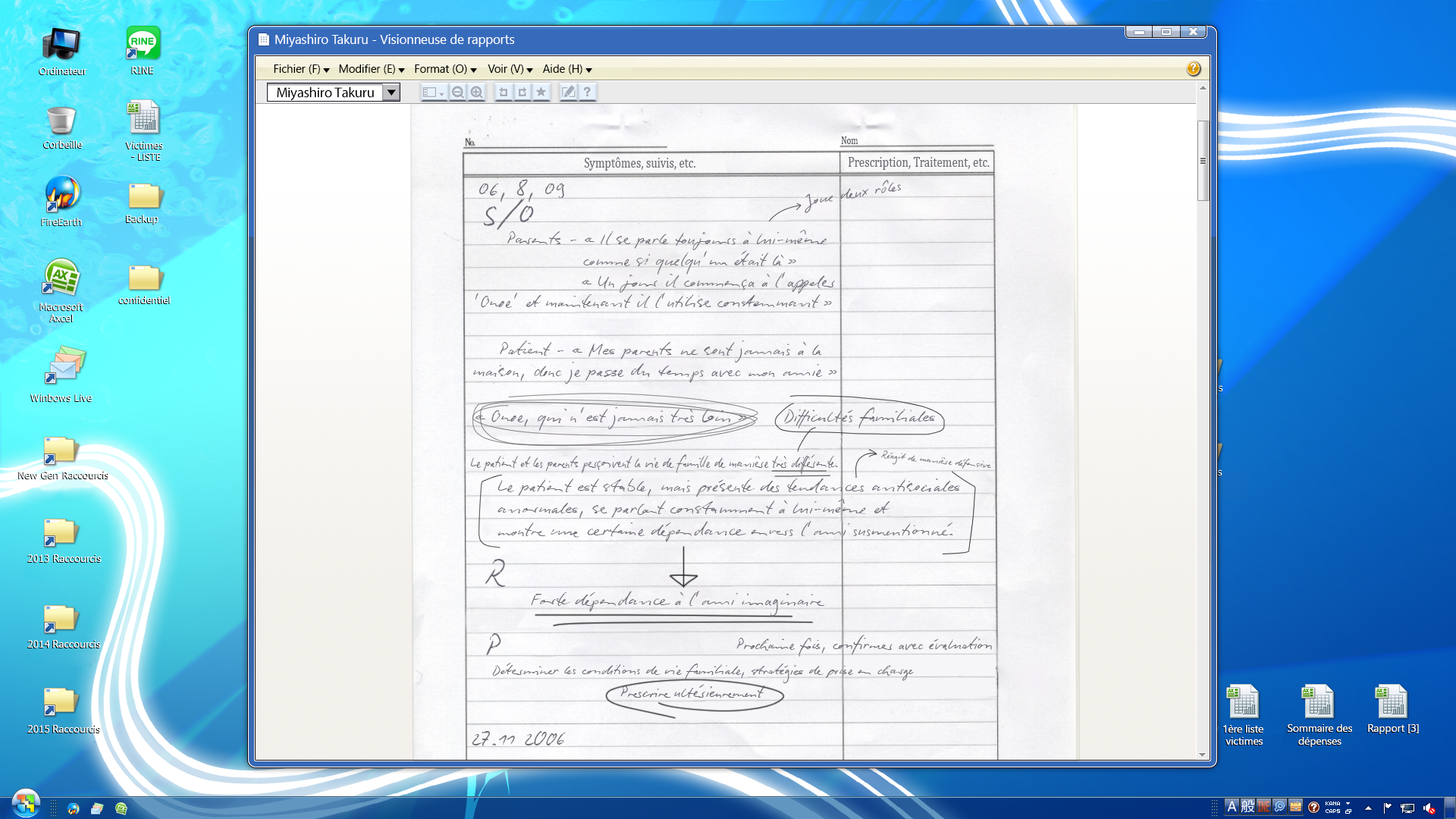
<style>
.page{position:relative;width:1456px;height:819px}
.page>*{position:absolute;margin:0}
.t1{font:12.6px "SegoeUIHistoric";color:#ffffff}
.t2{font:11.1px "SegoeUIHistoric";color:#000000}
.t3{font:10.8px "Cambria";color:#59555f;scale:0.76 1}
.t4{font:15.2px "Cambria";color:#726e79;scale:0.76 1}
.t5{font:22.7px "BiroScriptPlus";color:#726e79}
.t6{font:16.3px "BiroScriptPlus";color:#726e79}
.t7{font:34px "BiroScriptPlus";color:#726e79}
.t8{font:17.4px "BiroScriptPlus";color:#726e79}
.t9{font:18.2px "BiroScriptPlus";color:#726e79}
.t10{font:16.7px "BiroScriptPlus";color:#726e79;scale:0.68 1}
.t11{font:9.3px "BiroScriptPlus";color:#726e79}
.t12{font:32px "BiroScriptPlus";color:#726e79}
.t13{font:15.2px "BiroScriptPlus";color:#726e79}
.t14{font:14.3px "BiroScriptPlus";color:#726e79}
.t15{font:22px "BiroScriptPlus";color:#726e79}
</style>
<div class="page">
<p class="t1" style="left:275px;top:34px;width:240px;height:13px">Miyashiro Takuru - Visionneuse de rapports</p>
<p class="t2" style="left:274px;top:64px;width:46px;height:10px">Fichier (F)</p>
<p class="t2" style="left:339px;top:64px;width:56px;height:10px">Modifier (E)</p>
<p class="t2" style="left:415px;top:64px;width:52px;height:10px">Format (O)</p>
<p class="t2" style="left:488px;top:64px;width:36px;height:10px">Voir (V)</p>
<p class="t2" style="left:542px;top:64px;width:40px;height:10px">Aide (H)</p>
<p class="t3" style="left:841px;top:136px;width:17px;height:8px">Nom</p>
<p class="t4" style="left:584px;top:157px;width:111px;height:14px">Symptômes, suivis, etc.</p>
<p class="t4" style="left:849px;top:157px;width:141px;height:13px">Prescription, Traitement, etc.</p>
<p class="t5" style="left:479px;top:179px;width:86px;height:23px">06, 8, 09</p>
<p class="t6" style="left:805px;top:180px;width:96px;height:33px;rotate:-9deg">Joue deux rôles</p>
<p class="t7" style="left:483px;top:199px;width:51px;height:31px">S/0</p>
<p class="t8" style="left:475px;top:230px;width:360px;height:78px">Parents - « Il se parle toujours à lui-même<br>    comme si quelqu’un était là »<br>       « Un jour il commença à l’appeler<br>‘Onoe’ et maintenant il l’utilise constemmant »</p>
<p class="t9" style="left:473px;top:340px;width:364px;height:44px">Patient - « Mes parents ne sont jamais à la <br>maison, donc je passe du temps avec mon amie »</p>
<p class="t9" style="left:475px;top:407px;width:272px;height:24px">« Onoe, qui n’est jamais très loin »</p>
<p class="t9" style="left:784px;top:407px;width:151px;height:21px">Difficultés familiales</p>
<p class="t10" style="left:470px;top:454px;width:368px;height:21px">Le patient et les parents perçoivent la vie de famille de manière très différente.</p>
<p class="t11" style="left:881px;top:450px;width:110px;height:19px;rotate:6deg">Réagit de manière défensive</p>
<p class="t9" style="left:497px;top:479px;width:463px;height:63px">Le patient est stable, mais présente des tendances antisociales <br>anormales, se parlant constamment à lui-même et <br>montre une certaine dépendance envers l’ami susmentionné.</p>
<p class="t12" style="left:485px;top:559px;width:21px;height:28px">R</p>
<p class="t9" style="left:531px;top:591px;width:294px;height:26px">Forte dépendance à l’ami imaginaire</p>
<p class="t12" style="left:486px;top:633px;width:15px;height:22px">P</p>
<p class="t13" style="left:736px;top:635px;width:256px;height:22px">Prochaine fois, confirmer avec évaluation</p>
<p class="t14" style="left:492px;top:663px;width:422px;height:20px">Déterminer les conditions de vie familiale, stratégies de prise en charge</p>
<p class="t15" style="left:472px;top:731px;width:94px;height:15px">27.11 2006</p>
</div>
